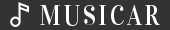
<style>
.page{position:relative;width:170px;height:30px;background:#333333}
.page>*{position:absolute;margin:0}
.t1{font:28.4px "Vidaloka-Regular";letter-spacing:0.1em;color:#ffffff;text-transform:uppercase;scale:0.86 1}
</style>
<div class="page">
<p class="t1" style="left:40px;top:5px;width:120px;height:21px">Musicar</p>
</div>
